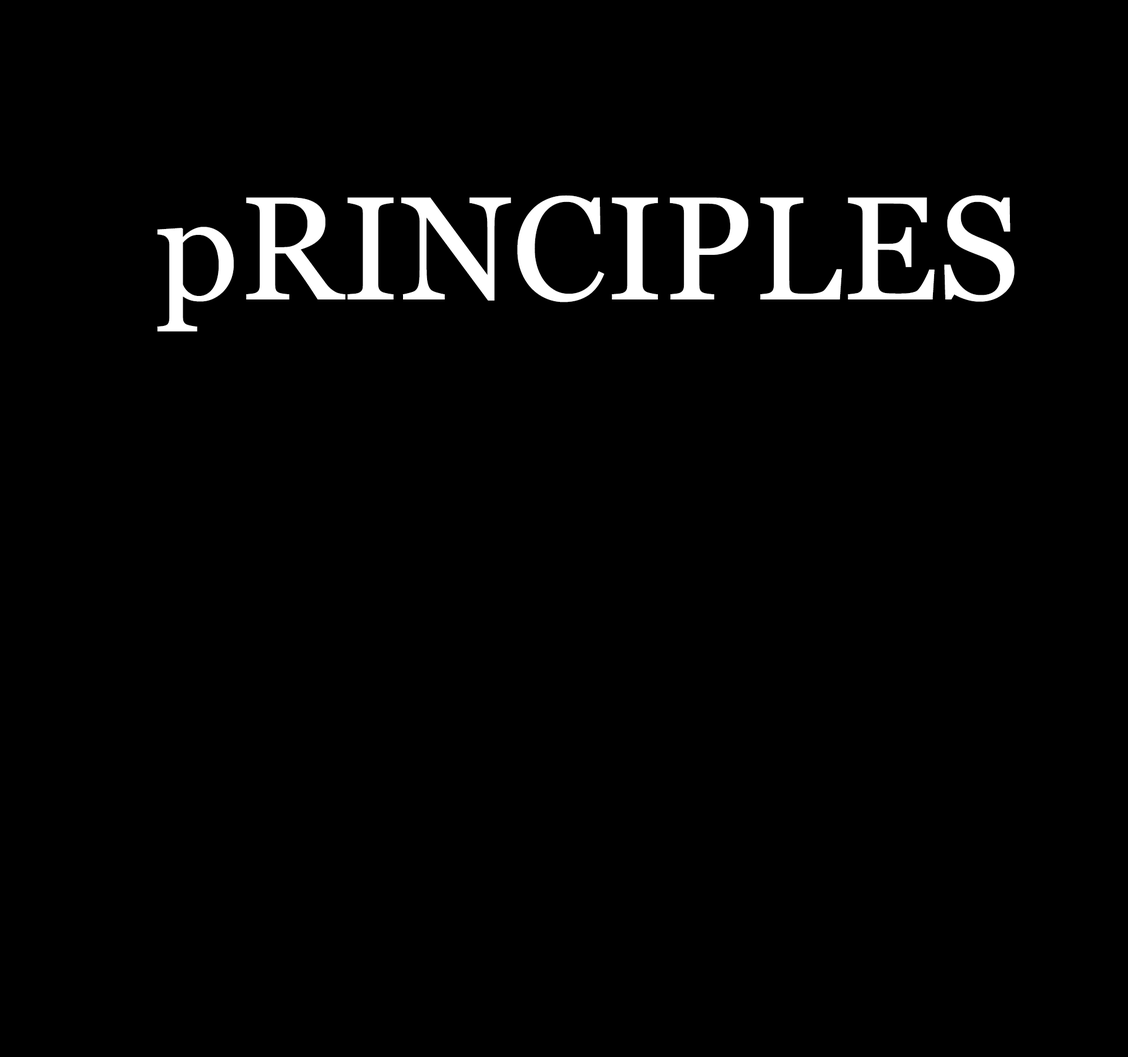
<style>
.page{position:relative;width:1128px;height:1057px;background:#000000}
.page>*{position:absolute;margin:0}
.t1{font:146.8px "Georgia";color:#ffffff}
</style>
<div class="page">
<p class="t1" style="left:157px;top:195px;width:857px;height:137px">pRINCIPLES</p>
</div>
